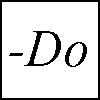
<style>
.page{position:relative;width:100px;height:100px;background:#ffffff}
.page>*{position:absolute;margin:0}
.t1{font:65px "Vijaya";color:#000000}
</style>
<div class="page">
<p class="t1" style="left:9px;top:31px;width:78px;height:36px">-Do</p>
</div>
